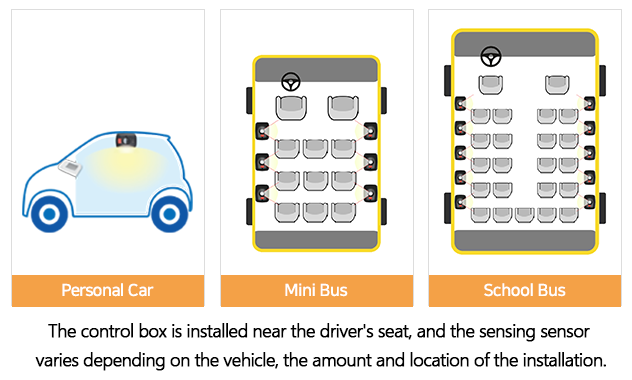
<style>
.page{position:relative;width:632px;height:380px;background:#ffffff}
.page>*{position:absolute;margin:0}
.t1{font:16.6px "NanumSquareB";letter-spacing:-0.03em;color:#ffffff}
.t2{font:18.1px/28.2px "MalgunGothic-Semilight";letter-spacing:-0.05em;color:#000000;font-weight:bold}
</style>
<div class="page">
<p class="t1" style="left:62px;top:283px;width:92px;height:14px">Personal Car</p>
<p class="t1" style="left:285px;top:283px;width:63px;height:14px">Mini Bus</p>
<p class="t1" style="left:484px;top:283px;width:82px;height:14px">School Bus</p>
<p class="t2" style="left:35px;top:323px;width:571px;height:48px;text-align:center">The control box is installed near the driver's seat, and the sensing sensor <br>varies depending on the vehicle, the amount and location of the installation.</p>
</div>
